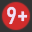
<style>
.page{position:relative;width:32px;height:32px;background:#d22c2c}
.page>*{position:absolute;margin:0}
.t1{font:23.9px "Bahnschrift-SemiBold";color:#f1dff3;scale:0.9 1}
</style>
<div class="page">
<p class="t1" style="left:7px;top:6px;width:21px;height:19px">9+</p>
</div>
